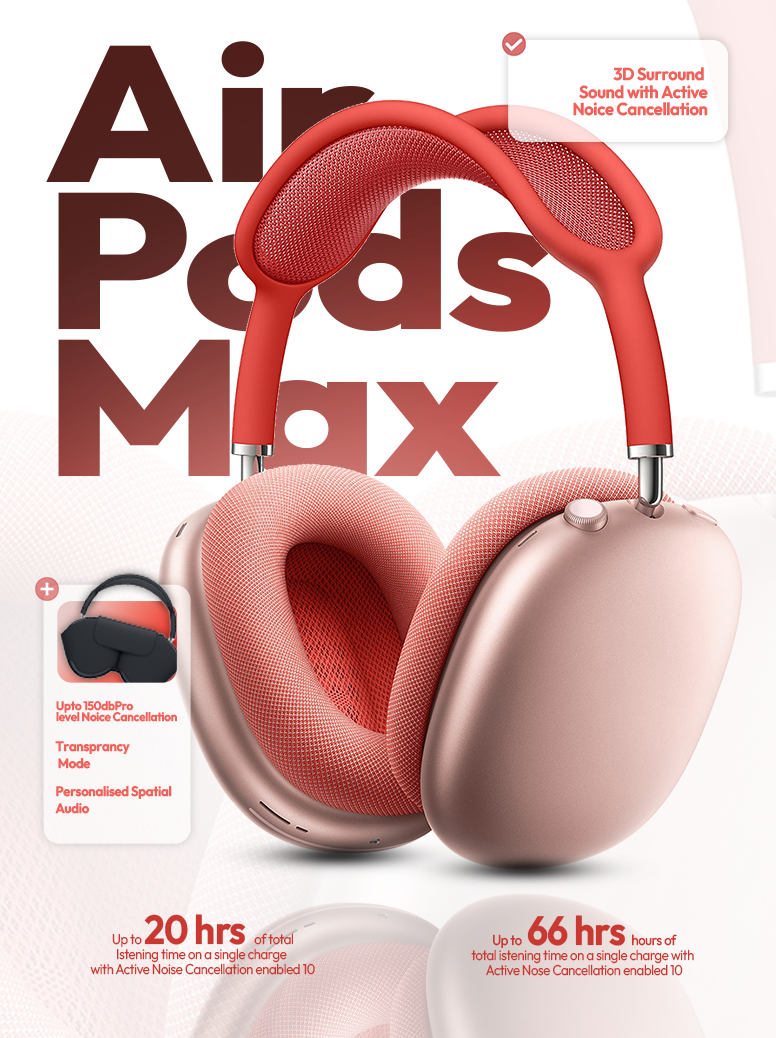
<style>
.page{position:relative;width:776px;height:1038px;background:#ffffff}
.page>*{position:absolute;margin:0}
.t1{font:192.2px/146.8px "Outfit-ExtraBold";letter-spacing:-0.02em;scale:1.2 1}
.t2{font:17.2px/17.5px "Outfit-SemiBold";letter-spacing:-0.02em;color:#f16159;scale:0.96 1}
.t3{font:12.2px/11.1px "Outfit-SemiBold";letter-spacing:-0.02em;color:#f16159;scale:0.96 1}
.t4{font:13.6px/16.6px "Outfit-SemiBold";letter-spacing:-0.02em;color:#f16159;scale:0.96 1}
.t5{font:14.2px/14.8px "Outfit-Light";letter-spacing:-0.02em;color:#c93931;scale:0.91 1}
.t6{font:40.7px/14.8px "Outfit-Bold";letter-spacing:-0.02em;color:#c93931;scale:0.91 1}
.t7{font:14.2px/14.8px "Outfit-Regular";letter-spacing:-0.02em;color:#c93931;scale:0.91 1}
</style>
<div class="page">
<p class="t1" style="left:46px;top:41px;width:509px;height:437px">Air<br>Pods<br>Max</p>
<p class="t2" style="left:573px;top:67px;width:135px;height:49px;text-align:right">3D Surround <br>Sound with Active<br> Noice Cancellation</p>
<p class="t3" style="left:56px;top:701px;width:121px;height:21px">Upto 150dbPro <br>level Noice Cancellation</p>
<p class="t4" style="left:55px;top:741px;width:75px;height:28px">Transprancy<br> Mode</p>
<p class="t4" style="left:55px;top:786px;width:117px;height:28px">Personalised Spatial <br>Audio</p>
<p class="t5" style="left:90px;top:914px;width:225px;height:61px;text-align:center">Up to <span class="t6">20 hrs  </span>of total<br>Istening time on a single charge <br>with Active Noise Cancellation enabled 10</p>
<p class="t5" style="left:471px;top:915px;width:223px;height:61px;text-align:center"><span class="t7">Up to  </span><span class="t6">66 hrs </span><span class="t7">hours of<br></span>total istening time on a single charge with <br>Active Nose Cancellation enabled 10</p>
</div>
